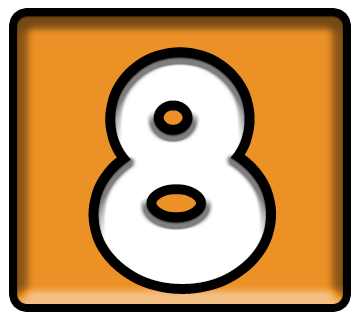
<style>
.page{position:relative;width:360px;height:320px;background:#ec9126}
.page>*{position:absolute;margin:0}
.t1{font:333.8px "Funhouse";color:#ffffff;scale:0.91 1}
</style>
<div class="page">
<p class="t1" style="left:98px;top:57px;width:168px;height:227px">8</p>
</div>
